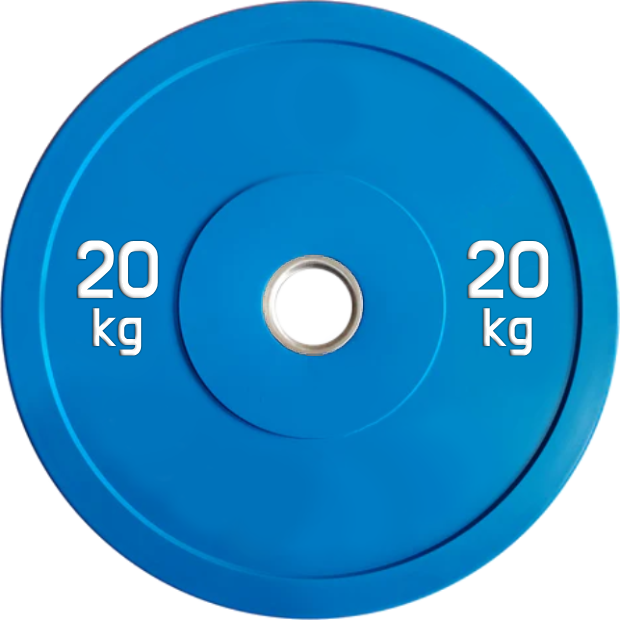
<style>
.page{position:relative;width:620px;height:620px;background:#ffffff}
.page>*{position:absolute;margin:0}
.t1{font:83.1px "DoHyeon-Regular";color:#ffffff}
.t2{font:55.4px "DoHyeon-Regular";color:#ffffff}
</style>
<div class="page">
<p class="t1" style="left:76px;top:240px;width:82px;height:58px">20</p>
<p class="t1" style="left:467px;top:240px;width:82px;height:58px">20</p>
<p class="t2" style="left:92px;top:308px;width:50px;height:48px">kg</p>
<p class="t2" style="left:483px;top:308px;width:49px;height:48px">kg</p>
</div>
